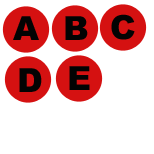
<style>
.page{position:relative;width:154px;height:154px;background:#ffffff}
.page>*{position:absolute;margin:0}
.t1{font:33.3px "Arial-Black";color:#030303}
</style>
<div class="page">
<p class="t1" style="left:13px;top:16px;width:26px;height:24px">A</p>
<p class="t1" style="left:65px;top:16px;width:23px;height:24px">B</p>
<p class="t1" style="left:111px;top:14px;width:24px;height:26px">C</p>
<p class="t1" style="left:19px;top:68px;width:23px;height:24px">D</p>
<p class="t1" style="left:69px;top:66px;width:21px;height:24px">E</p>
</div>
